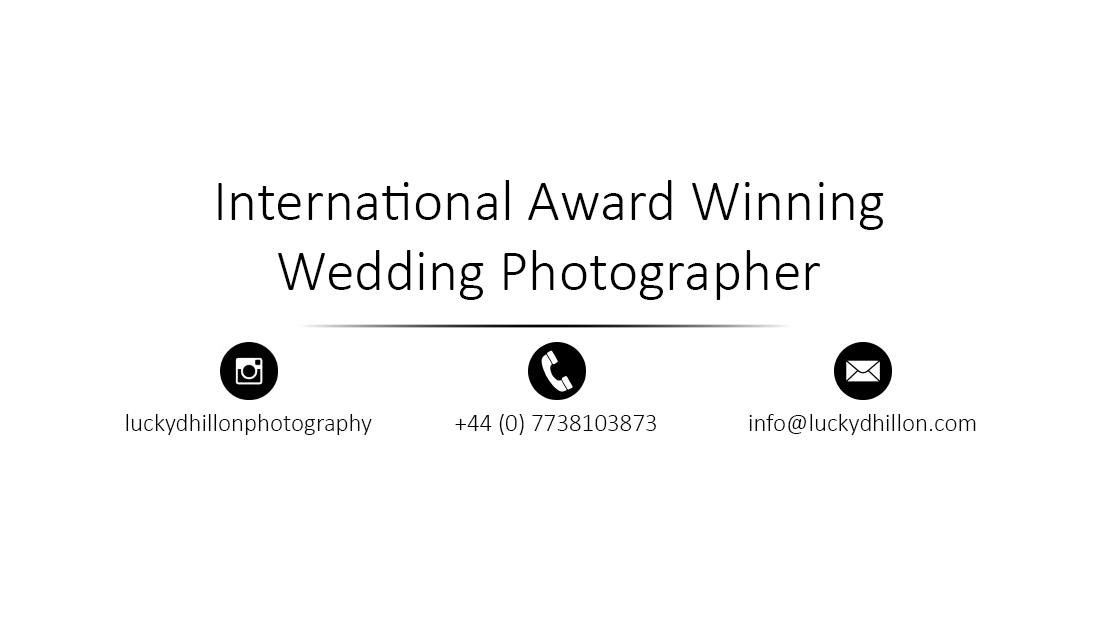
<style>
.page{position:relative;width:1102px;height:642px;background:#ffffff}
.page>*{position:absolute;margin:0}
.t1{font:58.3px "Calibri-Light";color:#000000}
.t2{font:25px "Calibri-Light";color:#000000}
</style>
<div class="page">
<p class="t1" style="left:218px;top:180px;width:666px;height:120px;text-align:center">International Award Winning<br>Wedding Photographer</p>
<p class="t2" style="left:126px;top:414px;width:246px;height:21px">luckydhillonphotography</p>
<p class="t2" style="left:455px;top:414px;width:201px;height:21px">+44 (0) 7738103873</p>
<p class="t2" style="left:749px;top:414px;width:227px;height:21px">info@luckydhillon.com</p>
</div>
